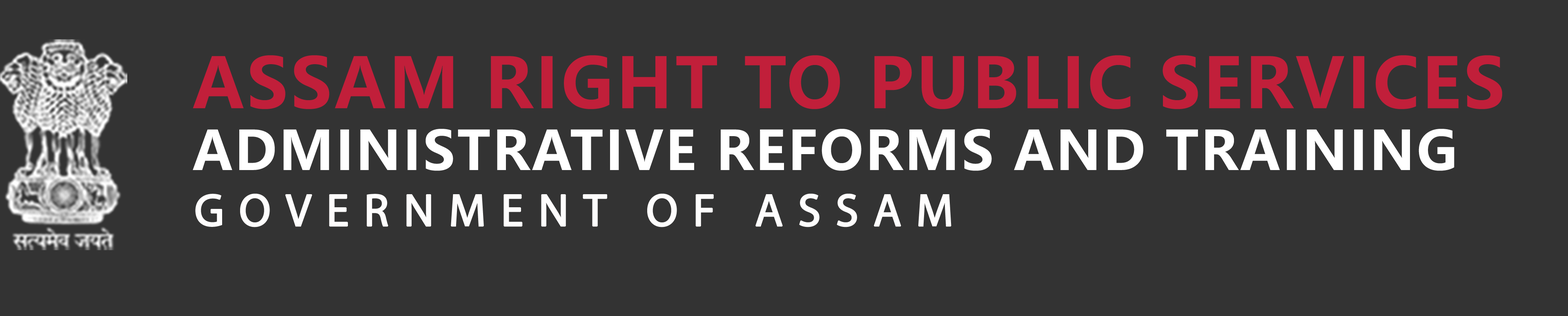
<style>
.page{position:relative;width:1568px;height:316px;background:#333333}
.page>*{position:absolute;margin:0}
.t1{font:68.6px "MicrosoftYaHei-Bold";letter-spacing:0.04em;color:#c11f3a}
.t2{font:53.4px "MicrosoftYaHei-Bold";letter-spacing:0.04em;color:#ffffff}
.t3{font:78.9px "MyriadPro-Regular";letter-spacing:0.3em;color:#fefdfd;font-weight:bold}
</style>
<div class="page">
<p class="t1" style="left:193px;top:55px;width:1309px;height:54px">ASSAM RIGHT TO PUBLIC SERVICES</p>
<p class="t2" style="left:193px;top:129px;width:1261px;height:42px">ADMINISTRATIVE REFORMS AND TRAINING</p>
<p class="t3" style="left:195px;top:193px;width:756px;height:34px">GOVERNMENT OF ASSAM</p>
</div>
